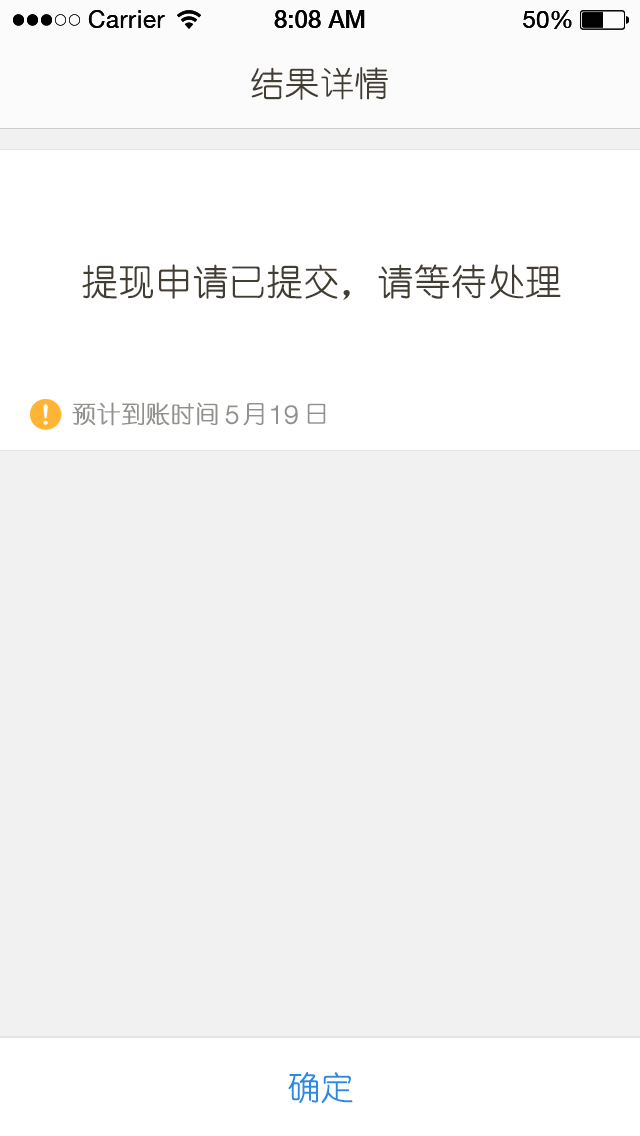
<style>
.page{position:relative;width:640px;height:1136px;background:#f1f1f1}
.page>*{position:absolute;margin:0}
.t1{font:34px "YouYuan";color:#433d33;text-transform:uppercase;font-weight:bold}
.t2{font:36px "YouYuan";color:#433e34;text-transform:uppercase;font-weight:bold}
.t3{font:24px "YouYuan";color:#93918d;text-transform:uppercase;font-weight:bold}
.t4{font:26px "HelveticaNeueLTPro-Lt";color:#93918d;text-transform:uppercase;font-weight:bold}
.t5{font:32px "YouYuan";color:#298ae4;text-transform:uppercase;font-weight:bold}
</style>
<div class="page">
<p class="t1" style="left:251px;top:67px;width:137px;height:33px">结果详情</p>
<p class="t2" style="left:82px;top:264px;width:479px;height:36px">提现申请已提交，请等待处理</p>
<p class="t3" style="left:72px;top:402px;width:146px;height:24px">预计到账时间</p>
<p class="t4" style="left:225px;top:405px;width:14px;height:20px">5</p>
<p class="t3" style="left:243px;top:403px;width:21px;height:23px">月</p>
<p class="t4" style="left:271px;top:405px;width:27px;height:20px">19</p>
<p class="t3" style="left:307px;top:403px;width:19px;height:21px">日</p>
<p class="t5" style="left:288px;top:1072px;width:65px;height:31px">确定</p>
</div>
